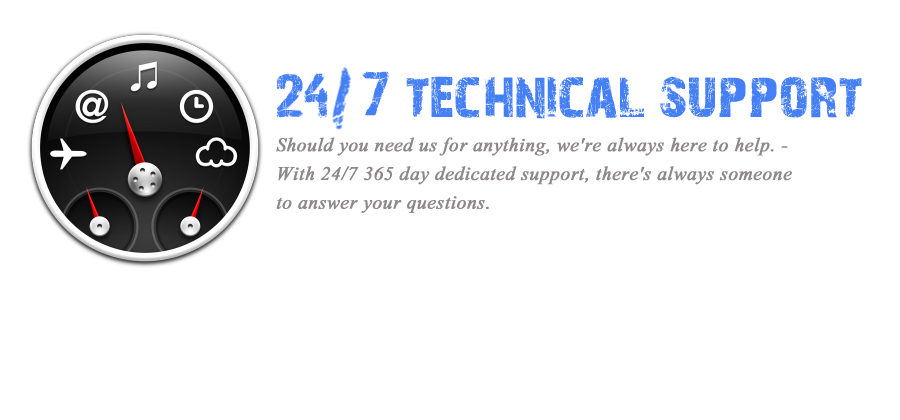
<style>
.page{position:relative;width:900px;height:420px;background:#ffffff}
.page>*{position:absolute;margin:0}
.t1{font:24px "Aparajita-Italic";color:#8e8888;font-weight:bold}
</style>
<div class="page">
<p class="t1" style="left:276px;top:137px;width:516px;height:76px">Should you need us for anything, we're always here to help. -<br>With 24/7 365 day dedicated support, there's always someone <br>to answer your questions.</p>
</div>
